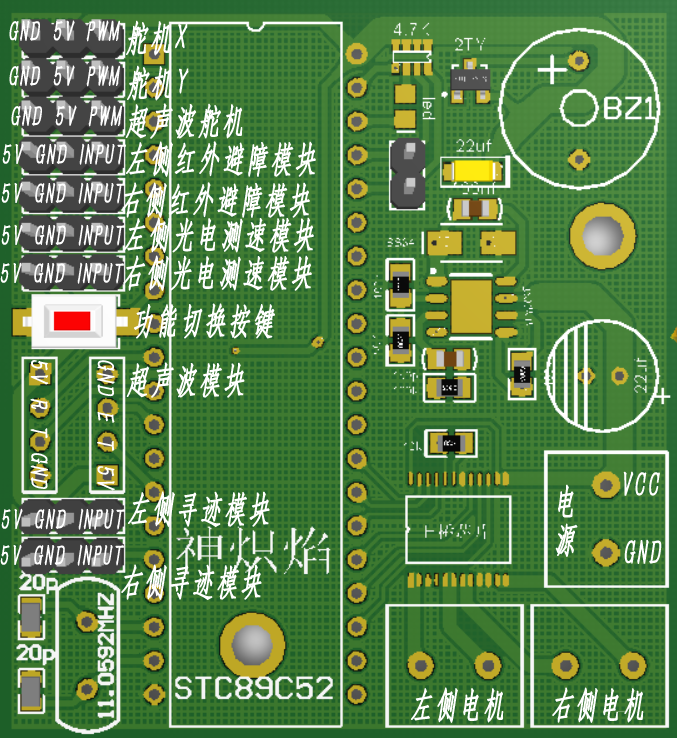
<style>
.page{position:relative;width:677px;height:738px}
.page>*{position:absolute;margin:0}
.t1{font:29.5px "HYSWLongFangSong";letter-spacing:0.075em;color:#ffffff;text-transform:uppercase;font-weight:bold;font-style:italic;scale:0.85 1}
.t2{font:35.4px "HYSWLongFangSong";letter-spacing:0.075em;color:#ffffff;text-transform:uppercase;font-weight:bold;font-style:italic;scale:0.85 1}
.t3{font:30px "HYSWLongFangSong";letter-spacing:0.075em;color:#ffffff;text-transform:uppercase;font-weight:bold;font-style:italic;scale:1.18 1}
</style>
<div class="page">
<p class="t1" style="left:9px;top:20px;width:111px;height:22px">GND 5V pwm</p>
<p class="t2" style="left:126px;top:20px;width:62px;height:36px">舵机X</p>
<p class="t1" style="left:9px;top:65px;width:111px;height:22px">GND 5V pwm</p>
<p class="t2" style="left:127px;top:65px;width:62px;height:36px">舵机Y</p>
<p class="t1" style="left:11px;top:105px;width:111px;height:22px">GND 5V pwm</p>
<p class="t2" style="left:125px;top:103px;width:118px;height:36px">超声波舵机</p>
<p class="t1" style="left:2px;top:143px;width:124px;height:22px">5V GND INPUT</p>
<p class="t2" style="left:126px;top:141px;width:190px;height:36px">左侧红外避障模块</p>
<p class="t1" style="left:1px;top:182px;width:124px;height:22px">5V GND INPUT</p>
<p class="t2" style="left:121px;top:182px;width:189px;height:36px">右侧红外避障模块</p>
<p class="t2" style="left:124px;top:217px;width:190px;height:36px">左侧光电测速模块</p>
<p class="t1" style="left:1px;top:224px;width:124px;height:22px">5V GND INPUT</p>
<p class="t2" style="left:123px;top:255px;width:189px;height:36px">右侧光电测速模块</p>
<p class="t1" style="left:0px;top:262px;width:124px;height:22px">5V GND INPUT</p>
<p class="t2" style="left:134px;top:303px;width:141px;height:36px">功能切换按键</p>
<p class="t1" style="left:30px;top:360px;width:19px;height:129px">5v r t gnd</p>
<p class="t1" style="left:97px;top:360px;width:18px;height:131px">gnd e t 5v</p>
<p class="t2" style="left:126px;top:362px;width:119px;height:36px">超声波模块</p>
<p class="t2" style="left:623px;top:471px;width:37px;height:25px">VCC</p>
<p class="t3" style="left:555px;top:484px;width:23px;height:73px">电源</p>
<p class="t2" style="left:128px;top:491px;width:142px;height:36px">左侧寻迹模块</p>
<p class="t1" style="left:1px;top:508px;width:124px;height:22px">5V GND INPUT</p>
<p class="t1" style="left:0px;top:544px;width:124px;height:22px">5V GND INPUT</p>
<p class="t2" style="left:624px;top:539px;width:38px;height:25px">GND</p>
<p class="t2" style="left:121px;top:564px;width:141px;height:36px">右侧寻迹模块</p>
<p class="t2" style="left:411px;top:687px;width:93px;height:36px">左侧电机</p>
<p class="t2" style="left:552px;top:687px;width:92px;height:36px">右侧电机</p>
</div>
